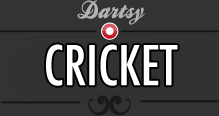
<style>
.page{position:relative;width:219px;height:116px;background:#333333}
.page>*{position:absolute;margin:0}
.t1{font:23.7px "BallparkWeiner";color:#b2b2b2}
.t2{font:53.2px "Futura-CondensedMedium";color:#ffffff;text-transform:uppercase}
</style>
<div class="page">
<p class="t1" style="left:77px;top:0px;width:68px;height:25px">Dartsy</p>
<p class="t2" style="left:46px;top:44px;width:132px;height:42px">CRICKET</p>
</div>
